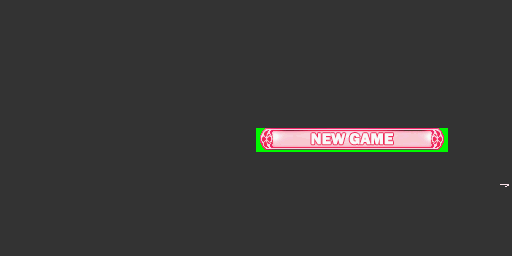
<style>
.page{position:relative;width:512px;height:256px;background:#333333}
.page>*{position:absolute;margin:0}
.t1{font:16px "FranklinGothic-Heavy";color:#f8f8f8;text-transform:uppercase}
</style>
<div class="page">
<p class="t1" style="left:311px;top:133px;width:82px;height:12px">NEW GAME</p>
<p class="t1" style="left:311px;top:133px;width:82px;height:12px">new game</p>
</div>
